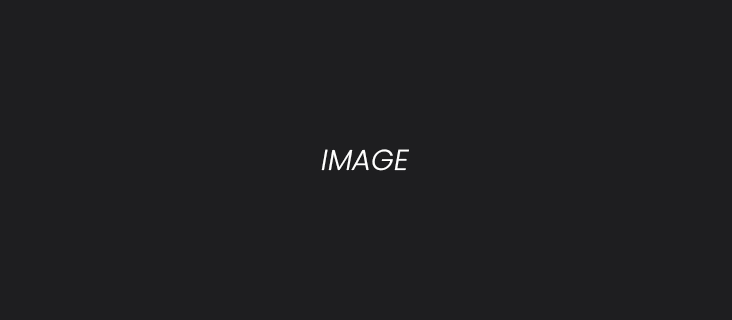
<style>
.page{position:relative;width:732px;height:320px;background:#1e1e20}
.page>*{position:absolute;margin:0}
.t1{font:29px "Poppins-LightItalic";color:#ffffff}
</style>
<div class="page">
<p class="t1" style="left:321px;top:149px;width:88px;height:22px">IMAGE</p>
</div>
